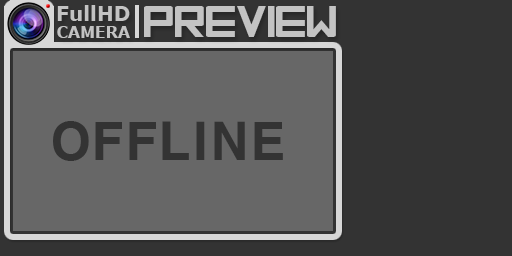
<style>
.page{position:relative;width:512px;height:256px;background:#333333}
.page>*{position:absolute;margin:0}
.t1{font:20px "Verdana-Bold";color:#c3c3c3}
.t2{font:37.5px "Orena";color:#c3c3c3}
.t3{font:15.6px "Verdana-Bold";color:#c3c3c3}
</style>
<div class="page">
<p class="t1" style="left:57px;top:5px;width:73px;height:16px">FullHD</p>
<p class="t2" style="left:144px;top:6px;width:192px;height:31px">PREVIEW</p>
<p class="t3" style="left:57px;top:26px;width:73px;height:12px">CAMERA</p>
</div>
